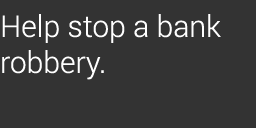
<style>
.page{position:relative;width:256px;height:128px;background:#333333}
.page>*{position:absolute;margin:0}
.t1{font:30px "Roboto-Light";color:#ffffff}
</style>
<div class="page">
<p class="t1" style="left:2px;top:14px;width:219px;height:66px">Help stop a bank robbery.</p>
</div>
